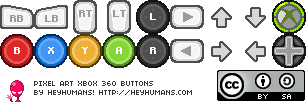
<style>
.page{position:relative;width:306px;height:102px;background:#ffffff}
.page>*{position:absolute;margin:0}
.t1{font:8px "04b03";color:#333333;text-transform:uppercase}
</style>
<div class="page">
<p class="t1" style="left:34px;top:81px;width:158px;height:14px">Pixel art xbox 360 buttons<br>by Heyhumans! http://heyhumans.com</p>
</div>
